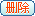
<style>
.page{position:relative;width:35px;height:16px;background:#ff4200}
.page>*{position:absolute;margin:0}
.t1{font:12px "SimSun"}
.t2{font:12px "SimSun";color:#ff4200}
</style>
<div class="page">
<p class="t1" style="left:6px;top:3px;width:23px;height:11px">删除</p>
<p class="t2" style="left:6px;top:2px;width:23px;height:11px">删除</p>
</div>
